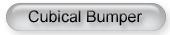
<style>
.page{position:relative;width:170px;height:35px}
.page>*{position:absolute;margin:0}
.t1{font:16px "ArialMT";color:#000000}
</style>
<div class="page">
<p class="t1" style="left:28px;top:10px;width:114px;height:16px">Cubical Bumper</p>
</div>
